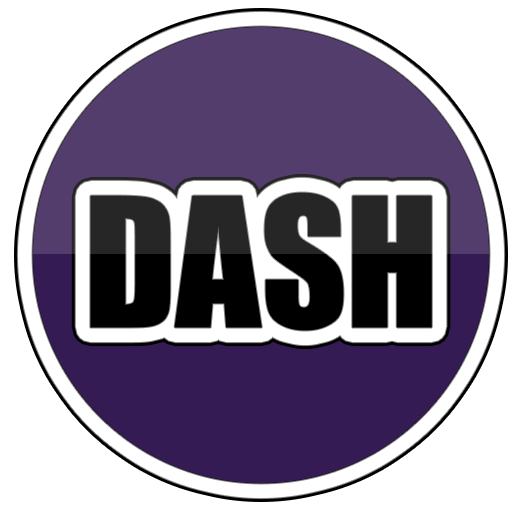
<style>
.page{position:relative;width:512px;height:512px;background:#ffffff}
.page>*{position:absolute;margin:0}
.t1{font:166px "Impact"}
</style>
<div class="page">
<p class="t1" style="left:90px;top:193px;width:342px;height:137px">DASH</p>
</div>
